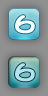
<style>
.page{position:relative;width:48px;height:96px}
.page>*{position:absolute;margin:0}
.t1{font:24px "DFMaruMoji-W9-WING-RKSJ-H";color:#ffffff;font-weight:bold}
.t2{font:24px "DFMaruMoji-W9-WING-RKSJ-H";color:#b5e3e9;font-weight:bold}
</style>
<div class="page">
<p class="t1" style="left:15px;top:15px;width:20px;height:19px">6</p>
<p class="t2" style="left:15px;top:63px;width:20px;height:19px">6</p>
</div>
